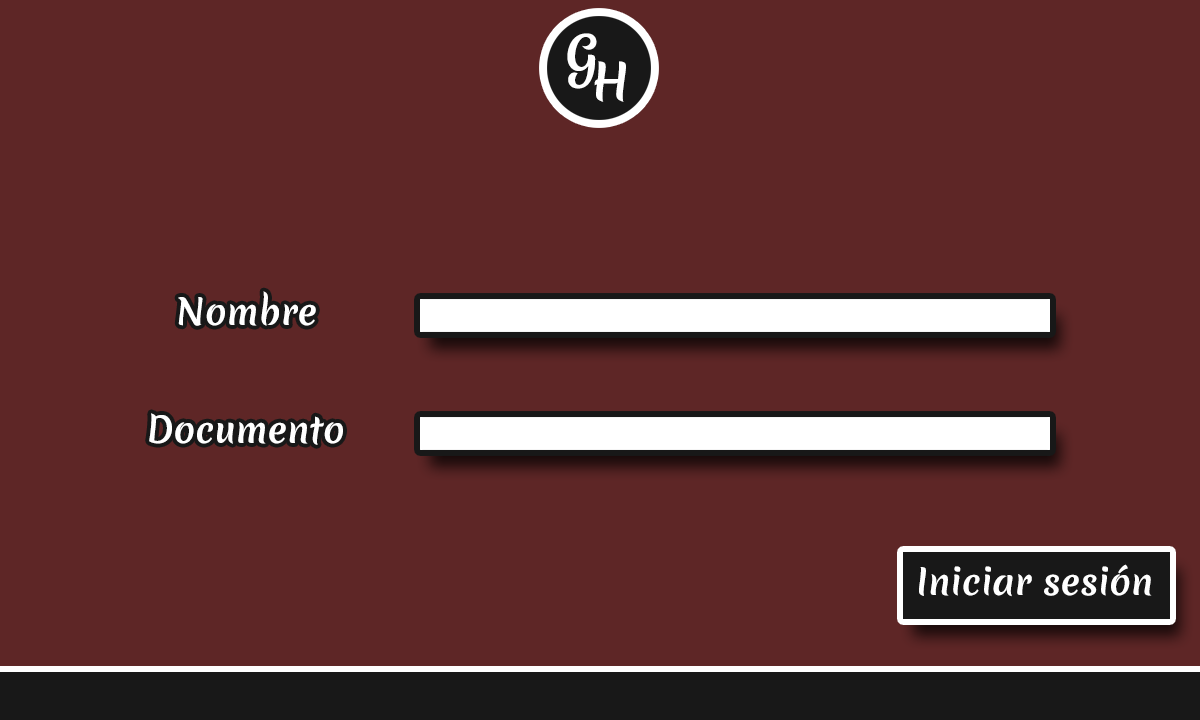
<style>
.page{position:relative;width:1200px;height:720px;background:#5e2626}
.page>*{position:absolute;margin:0}
.t1{font:48.4px "MeriendaOne-Regular";color:#ffffff}
.t2{font:35.1px "MeriendaOne-Regular";color:#ffffff}
</style>
<div class="page">
<p class="t1" style="left:567px;top:33px;width:30px;height:56px">G</p>
<p class="t1" style="left:594px;top:61px;width:32px;height:41px">H</p>
<p class="t2" style="left:178px;top:291px;width:138px;height:35px">Nombre</p>
<p class="t2" style="left:149px;top:413px;width:194px;height:32px">Documento</p>
<p class="t2" style="left:919px;top:564px;width:233px;height:33px">Iniciar sesión</p>
</div>
